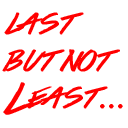
<style>
.page{position:relative;width:128px;height:128px;background:#ffffff}
.page>*{position:absolute;margin:0}
.t1{font:30.7px/37px "ColorsOfAutumn";color:#ff0000;font-weight:bold}
</style>
<div class="page">
<p class="t1" style="left:2px;top:12px;width:121px;height:103px">last<br>but not<br>Least...</p>
</div>
